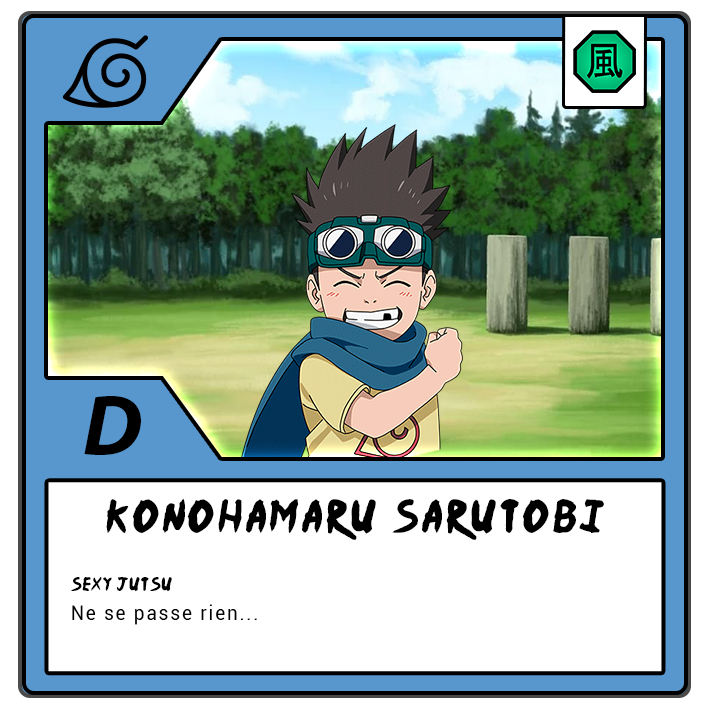
<style>
.page{position:relative;width:709px;height:709px;background:#ffffff}
.page>*{position:absolute;margin:0}
.t1{font:87.5px "MyriadPro-BoldIt";letter-spacing:-0.12em;color:#000000}
.t2{font:37.5px "Ninja-Naruto";letter-spacing:0.1em;color:#000000}
.t3{font:15.4px "Ninja-Naruto";letter-spacing:0.07em;color:#000000}
.t4{font:20.8px "Roboto-Regular";letter-spacing:0.1em;color:#000000;scale:0.9 1}
</style>
<div class="page">
<p class="t1" style="left:84px;top:396px;width:57px;height:59px">D</p>
<p class="t2" style="left:106px;top:498px;width:498px;height:42px">Konohamaru Sarutobi</p>
<p class="t3" style="left:71px;top:577px;width:101px;height:15px">SEXY JUTSU</p>
<p class="t4" style="left:72px;top:604px;width:185px;height:21px">Ne se passe rien...</p>
</div>
